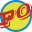
<style>
.page{position:relative;width:32px;height:32px;background:#e2e23c}
.page>*{position:absolute;margin:0}
.t1{font:19.9px "VinetaBT-Regular";color:#c12c2c;scale:0.78 1}
</style>
<div class="page">
<p class="t1" style="left:0px;top:3px;width:33px;height:26px">PO</p>
</div>
